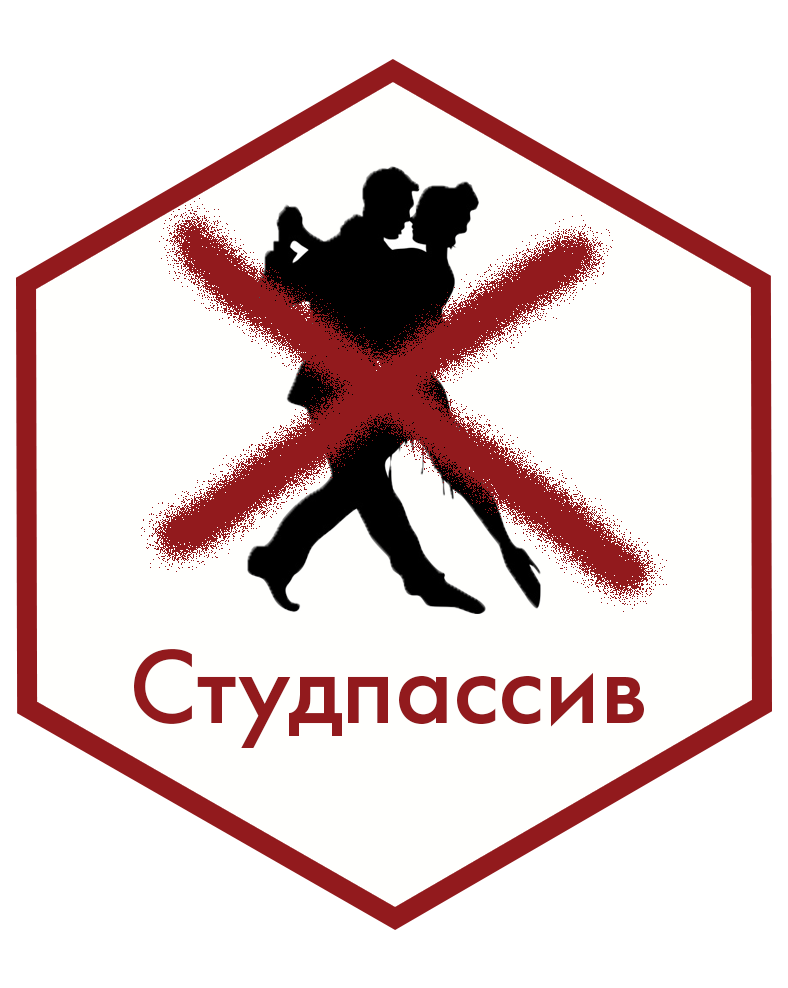
<style>
.page{position:relative;width:788px;height:988px;background:#fffffd}
.page>*{position:absolute;margin:0}
.t1{font:110.1px "FuturaPT-Medium";letter-spacing:-0.005em;color:#921a1d}
</style>
<div class="page">
<p class="t1" style="left:134px;top:649px;width:510px;height:99px">Студпассив</p>
</div>
